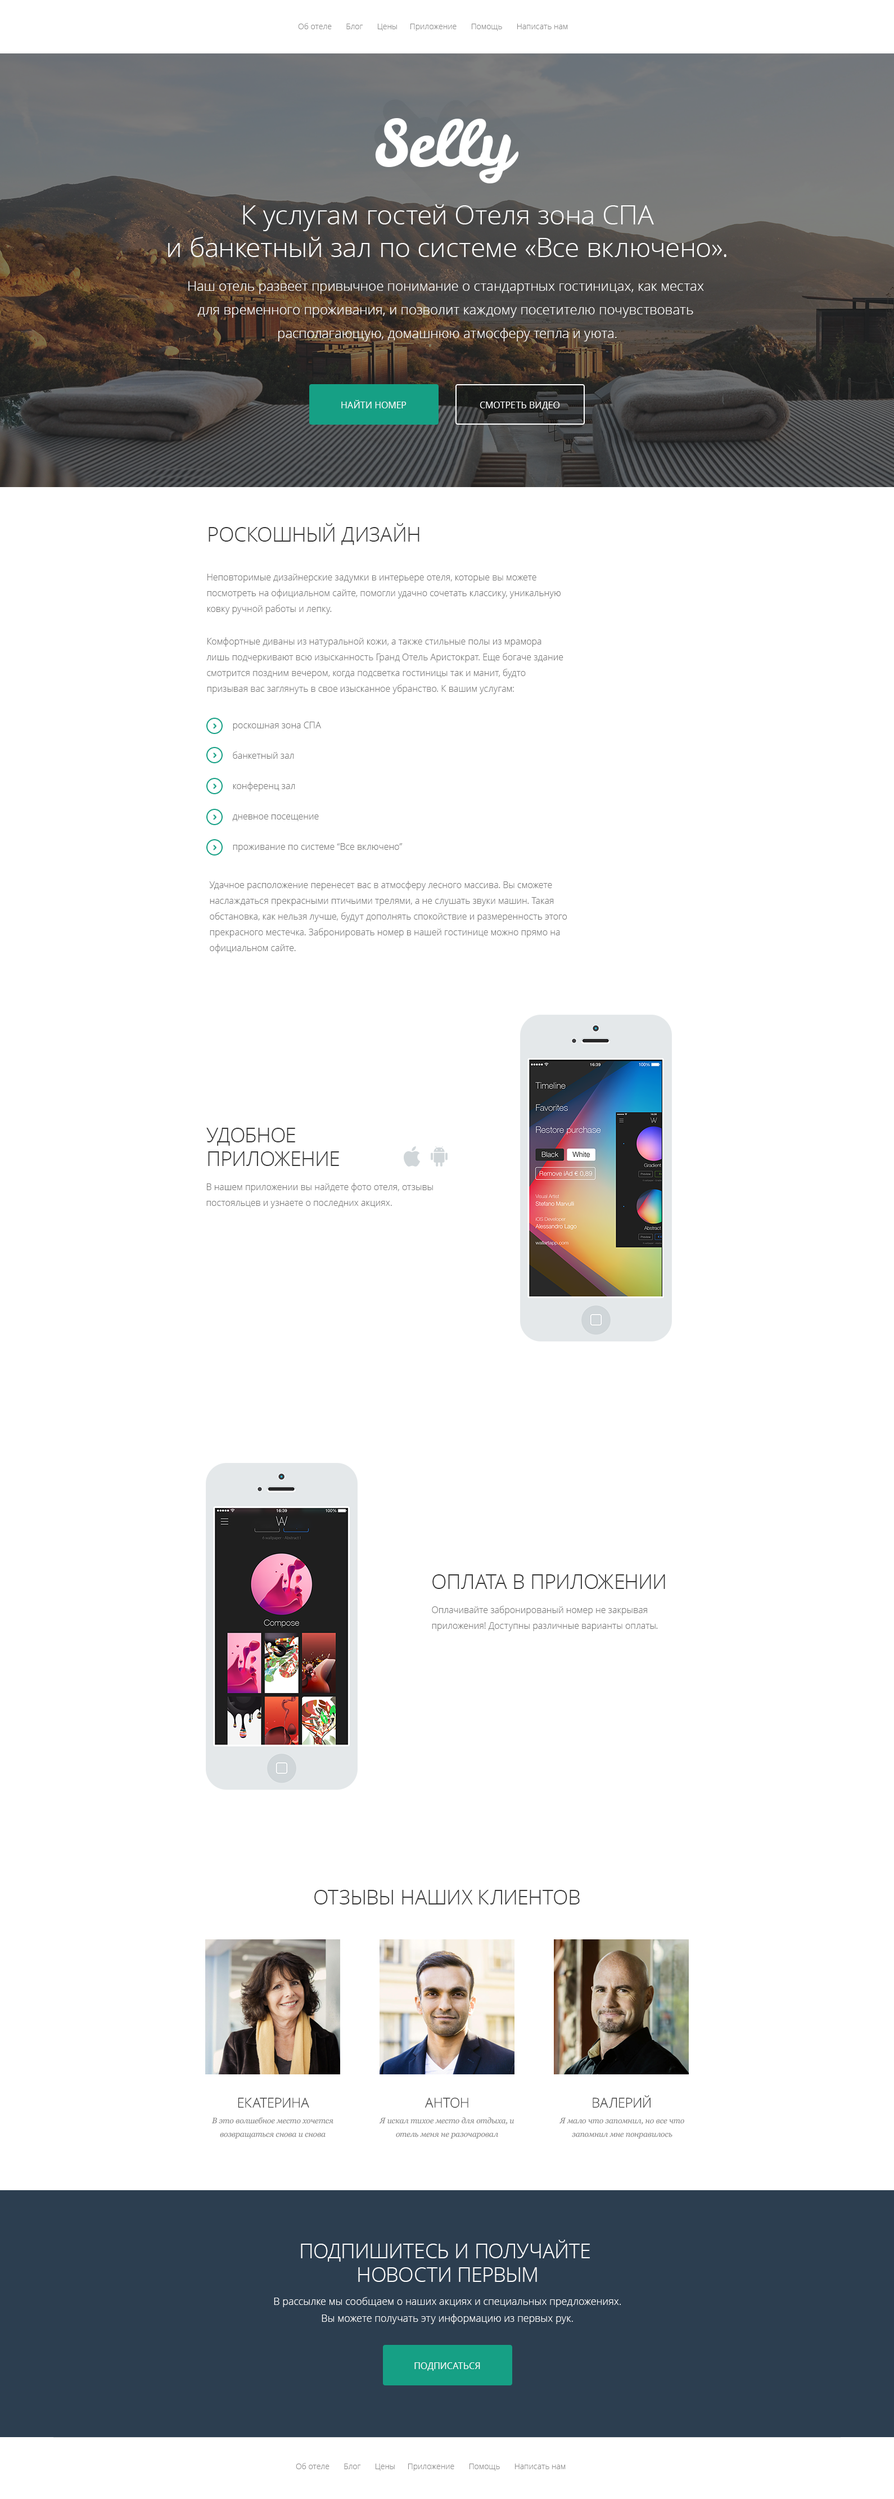
<style>
.page{position:relative;width:894px;height:2499px;background:#ffffff}
.page>*{position:absolute;margin:0}
.t1{font:7.9px "OpenSans-Light";color:#8a8a8a}
.t2{font:27px/32.6px "OpenSans-Light";color:#ffffff}
.t3{font:13.5px/23.6px "OpenSans-Light";color:#ffffff}
.t4{font:9px "OpenSans-Regular";letter-spacing:0.005em;color:#ffffff;text-transform:uppercase}
.t5{font:20.2px "OpenSans-Light";color:#363636;text-transform:uppercase}
.t6{font:9px/15.8px "OpenSans-Light";color:#777777}
.t7{font:9px/30.4px "OpenSans-Light";color:#777777}
.t8{font:20.2px/23.6px "OpenSans-Light";color:#363636;text-transform:uppercase}
.t9{font:7.9px/23.6px "Georgia-Italic";color:#8a8a8a}
.t10{font:7.9px "Georgia-Italic";color:#8a8a8a}
.t11{font:13.5px "OpenSans-Light";color:#363636;text-transform:uppercase}
.t12{font:7.9px/13.5px "Georgia-Italic";color:#8a8a8a}
.t13{font:20.2px/23.6px "OpenSans-Light";color:#ffffff;text-transform:uppercase}
.t14{font:10.1px/16.9px "OpenSans-Light";color:#ffffff}
</style>
<div class="page">
<p class="t1" style="left:298px;top:23px;width:270px;height:8px">Об отеле       Блог       Цены      Приложение       Помощь       Написать нам</p>
<p class="t2" style="left:168px;top:204px;width:559px;height:53px;text-align:center">К услугам гостей Отеля зона СПА <br>и банкетный зал по системе «Все включено».</p>
<p class="t3" style="left:188px;top:281px;width:516px;height:60px;text-align:center">Наш отель развеет привычное понимание о стандартных гостиницах, как местах <br>для временного проживания, и позволит каждому посетителю почувствовать <br>располагающую, домашнюю атмосферу тепла и уюта.</p>
<p class="t4" style="left:341px;top:400px;width:66px;height:8px">НАЙТИ НОМЕР</p>
<p class="t4" style="left:480px;top:402px;width:80px;height:8px">СМОТРЕТЬ ВИДЕО</p>
<p class="t5" style="left:209px;top:523px;width:211px;height:22px">РОСКОШНЫЙ ДИЗАЙН</p>
<p class="t6" style="left:207px;top:574px;width:354px;height:40px">Неповторимые дизайнерские задумки в интерьере отеля, которые вы можете посмотреть на официальном сайте, помогли удачно сочетать классику, уникальную ковку ручной работы и лепку.</p>
<p class="t6" style="left:206px;top:637px;width:358px;height:57px">Комфортные диваны из натуральной кожи, а также стильные полы из мрамора лишь подчеркивают всю изысканность Гранд Отель Аристократ. Еще богаче здание смотрится поздним вечером, когда подсветка гостиницы так и манит, будто призывая вас заглянуть в свое изысканное убранство. К вашим услугам:</p>
<p class="t7" style="left:232px;top:722px;width:171px;height:130px">роскошная зона СПА<br>банкетный зал<br>конференц зал<br>дневное посещение<br>проживание по системе “Все включено”</p>
<p class="t6" style="left:209px;top:881px;width:358px;height:72px">Удачное расположение перенесет вас в атмосферу лесного массива. Вы сможете наслаждаться прекрасными птичьими трелями, а не слушать звуки машин. Такая обстановка, как нельзя лучше, будут дополнять спокойствие и размеренность этого прекрасного местечка. Забронировать номер в нашей гостинице можно прямо на официальном сайте.</p>
<p class="t8" style="left:206px;top:1128px;width:133px;height:38px"><span class="t9"><br></span>УДОБНОЕ<br>ПРИЛОЖЕНИЕ</p>
<p class="t6" style="left:206px;top:1183px;width:227px;height:25px">В нашем приложении вы найдете фото отеля, отзывы постояльцев и узнаете о последних акциях.</p>
<p class="t5" style="left:433px;top:1574px;width:232px;height:15px"><span class="t10"><br></span>ОПЛАТА В ПРИЛОЖЕНИИ</p>
<p class="t6" style="left:432px;top:1606px;width:226px;height:25px">Оплачивайте забронированый номер не закрывая приложения! Доступны различные варианты оплаты.</p>
<p class="t5" style="left:314px;top:1890px;width:266px;height:15px">ОТЗЫВЫ НАШИХ КЛИЕНТОВ</p>
<p class="t11" style="left:238px;top:2098px;width:71px;height:10px">Екатерина</p>
<p class="t11" style="left:425px;top:2098px;width:44px;height:10px">антон</p>
<p class="t11" style="left:593px;top:2095px;width:58px;height:13px">валерий</p>
<p class="t12" style="left:212px;top:2117px;width:122px;height:22px;text-align:center">В это волшебное место хочется возвращаться снова и снова</p>
<p class="t12" style="left:379px;top:2117px;width:135px;height:22px;text-align:center">Я искал тихое место для отдыха, и отель меня не разочаровал</p>
<p class="t12" style="left:559px;top:2118px;width:126px;height:21px;text-align:center">Я мало что запомнил, но все что запомнил мне понравилось</p>
<p class="t13" style="left:301px;top:2240px;width:289px;height:42px;text-align:center">ПОДПИШИТЕСЬ И ПОЛУЧАЙТЕ <br>НОВОСТИ ПЕРВЫМ</p>
<p class="t14" style="left:274px;top:2297px;width:347px;height:27px;text-align:center">В рассылке мы сообщаем о наших акциях и специальных предложениях. <br>Вы можете получать эту информацию из первых рук.</p>
<p class="t4" style="left:415px;top:2362px;width:65px;height:9px">ПОДПИСАТЬСЯ</p>
<p class="t1" style="left:296px;top:2463px;width:270px;height:8px">Об отеле       Блог       Цены      Приложение       Помощь       Написать нам</p>
</div>
